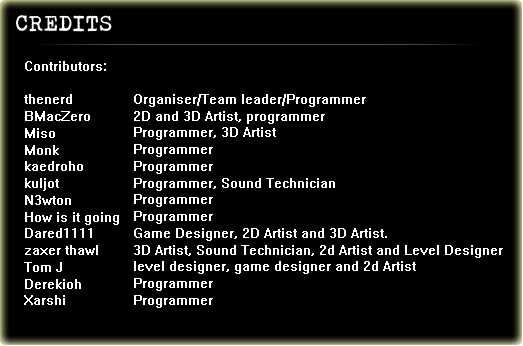
<style>
.page{position:relative;width:523px;height:346px;background:#000000}
.page>*{position:absolute;margin:0}
.t1{font:21.9px "Bohemian-typewriter";color:#ffffff}
.t2{font:13.9px "System";color:#ffffff}
</style>
<div class="page">
<p class="t1" style="left:16px;top:15px;width:96px;height:17px">CREDITS</p>
<p class="t2" style="left:24px;top:61px;width:95px;height:244px">Contributors:<br><br>thenerd<br>BMacZero  <br>Miso<br>Monk<br>kaedroho<br>kuljot  <br>N3wton <br>How is it going <br>Dared1111 <br>zaxer thawl <br>Tom J<br>Derekioh<br>Xarshi</p>
<p class="t2" style="left:134px;top:94px;width:369px;height:214px">Organiser/Team leader/Programmer<br>2D and 3D Artist, programmer<br>Programmer, 3D Artist<br>Programmer<br>Programmer<br>Programmer, Sound Technician<br>Programmer<br>Programmer<br>Game Designer, 2D Artist and 3D Artist.<br>3D Artist, Sound Technician, 2d Artist and Level Designer<br>level designer, game designer and 2d Artist<br>Programmer<br>Programmer</p>
</div>
